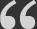
<style>
.page{position:relative;width:37px;height:29px;background:#333333}
.page>*{position:absolute;margin:0}
.t1{font:110px "Georgia";color:#d3d3d3}
</style>
<div class="page">
<p class="t1" style="left:0px;top:0px;width:37px;height:29px">“</p>
</div>
